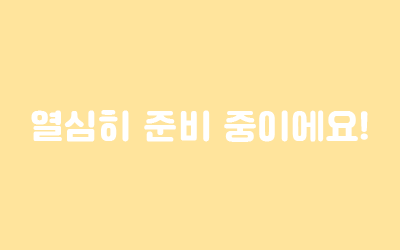
<style>
.page{position:relative;width:400px;height:250px;background:#ffe49c}
.page>*{position:absolute;margin:0}
.t1{font:36px "Cafe24Ssurround";color:#ffffff}
</style>
<div class="page">
<p class="t1" style="left:31px;top:110px;width:337px;height:32px">열심히 준비 중이에요!</p>
</div>
